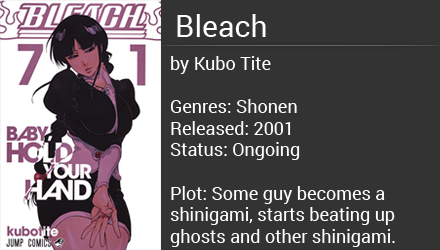
<style>
.page{position:relative;width:440px;height:250px;background:#333333}
.page>*{position:absolute;margin:0}
.t1{font:30px "Roboto-Regular";color:#ffffff}
.t2{font:18px "Roboto-Regular";color:#ffffff}
</style>
<div class="page">
<p class="t1" style="left:177px;top:14px;width:89px;height:23px">Bleach</p>
<p class="t2" style="left:170px;top:56px;width:225px;height:191px">by Kubo Tite<br><br>Genres: Shonen<br>Released: 2001<br>Status: Ongoing<br><br>Plot: Some guy becomes a<br>shinigami, starts beating up <br>ghosts and other shinigami.</p>
</div>
